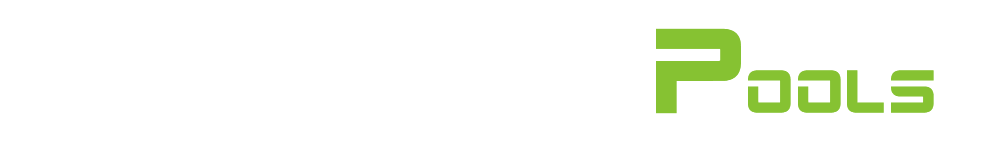
<style>
.page{position:relative;width:1000px;height:150px;background:#ffffff}
.page>*{position:absolute;margin:0}
.t1{font:120px "2015Cruiser-Bold";color:#86c232}
.t2{font:60px "2015Cruiser-Bold";color:#86c232}
</style>
<div class="page">
<p class="t1" style="left:656px;top:28px;width:85px;height:86px">P</p>
<p class="t2" style="left:748px;top:70px;width:186px;height:43px">ools</p>
</div>
